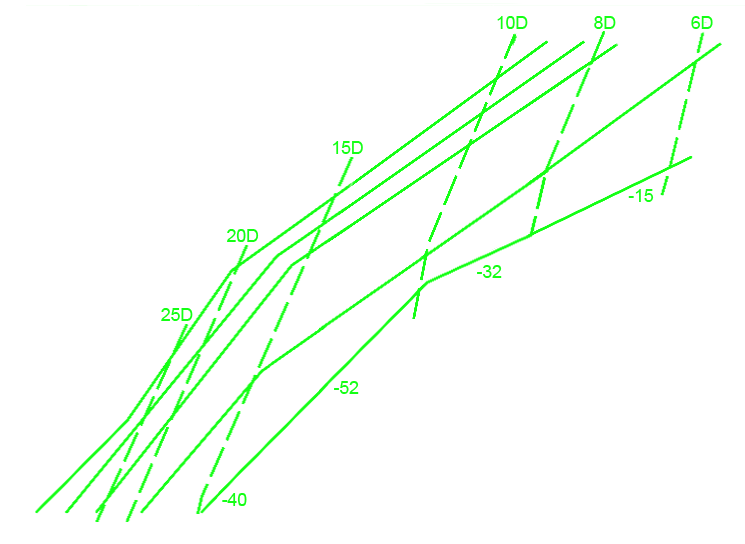
<style>
.page{position:relative;width:745px;height:544px;background:#ffffff}
.page>*{position:absolute;margin:0}
.t1{font:18px "ArialMT";letter-spacing:-0.015em;color:#14ff15}
</style>
<div class="page">
<p class="t1" style="left:497px;top:16px;width:31px;height:13px">10D</p>
<p class="t1" style="left:594px;top:16px;width:22px;height:13px">8D</p>
<p class="t1" style="left:691px;top:16px;width:22px;height:13px">6D</p>
<p class="t1" style="left:333px;top:141px;width:30px;height:13px">15D</p>
<p class="t1" style="left:628px;top:189px;width:26px;height:13px">-15</p>
<p class="t1" style="left:227px;top:229px;width:32px;height:13px">20D</p>
<p class="t1" style="left:477px;top:265px;width:25px;height:13px">-32</p>
<p class="t1" style="left:161px;top:308px;width:32px;height:13px">25D</p>
<p class="t1" style="left:334px;top:381px;width:25px;height:13px">-52</p>
<p class="t1" style="left:222px;top:493px;width:25px;height:13px">-40</p>
</div>
